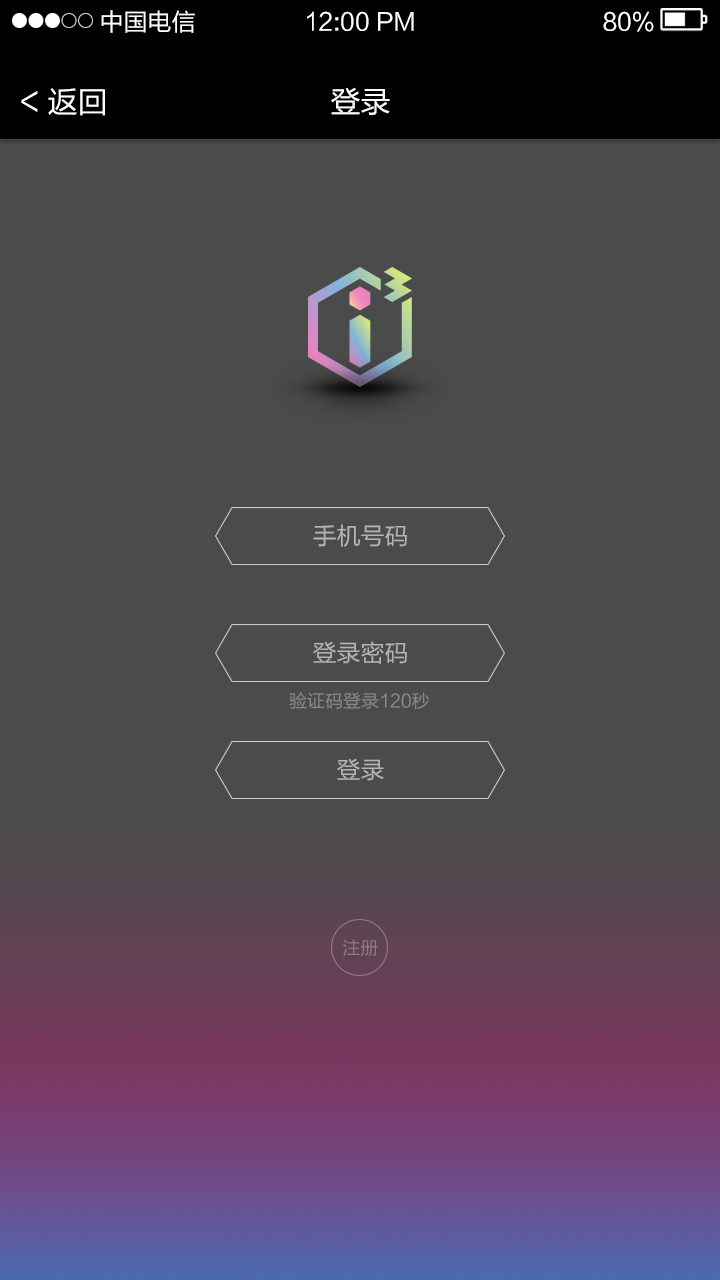
<style>
.page{position:relative;width:720px;height:1280px;background:#4a4c4b}
.page>*{position:absolute;margin:0}
.t1{font:24px "FZLTHK--GBK1-0";color:#ffffff}
.t2{font:30px "FZLTHK--GBK1-0";color:#ffffff}
.t3{font:24px/117px "FZLTHK--GBK1-0";color:#b2b5b4}
.t4{font:18px "FZLTHK--GBK1-0";color:#888a8a}
</style>
<div class="page">
<p class="t1" style="left:101px;top:10px;width:94px;height:23px">中国电信</p>
<p class="t1" style="left:307px;top:11px;width:107px;height:20px">12:00 PM</p>
<p class="t1" style="left:603px;top:11px;width:51px;height:21px">80%</p>
<p class="t2" style="left:21px;top:88px;width:84px;height:28px">&lt; 返回</p>
<p class="t2" style="left:331px;top:87px;width:59px;height:28px">登录</p>
<p class="t3" style="left:313px;top:524px;width:94px;height:257px;text-align:center">手机号码<br>登录密码<br>登录</p>
<p class="t4" style="left:289px;top:692px;width:140px;height:17px">验证码登录120秒</p>
</div>
